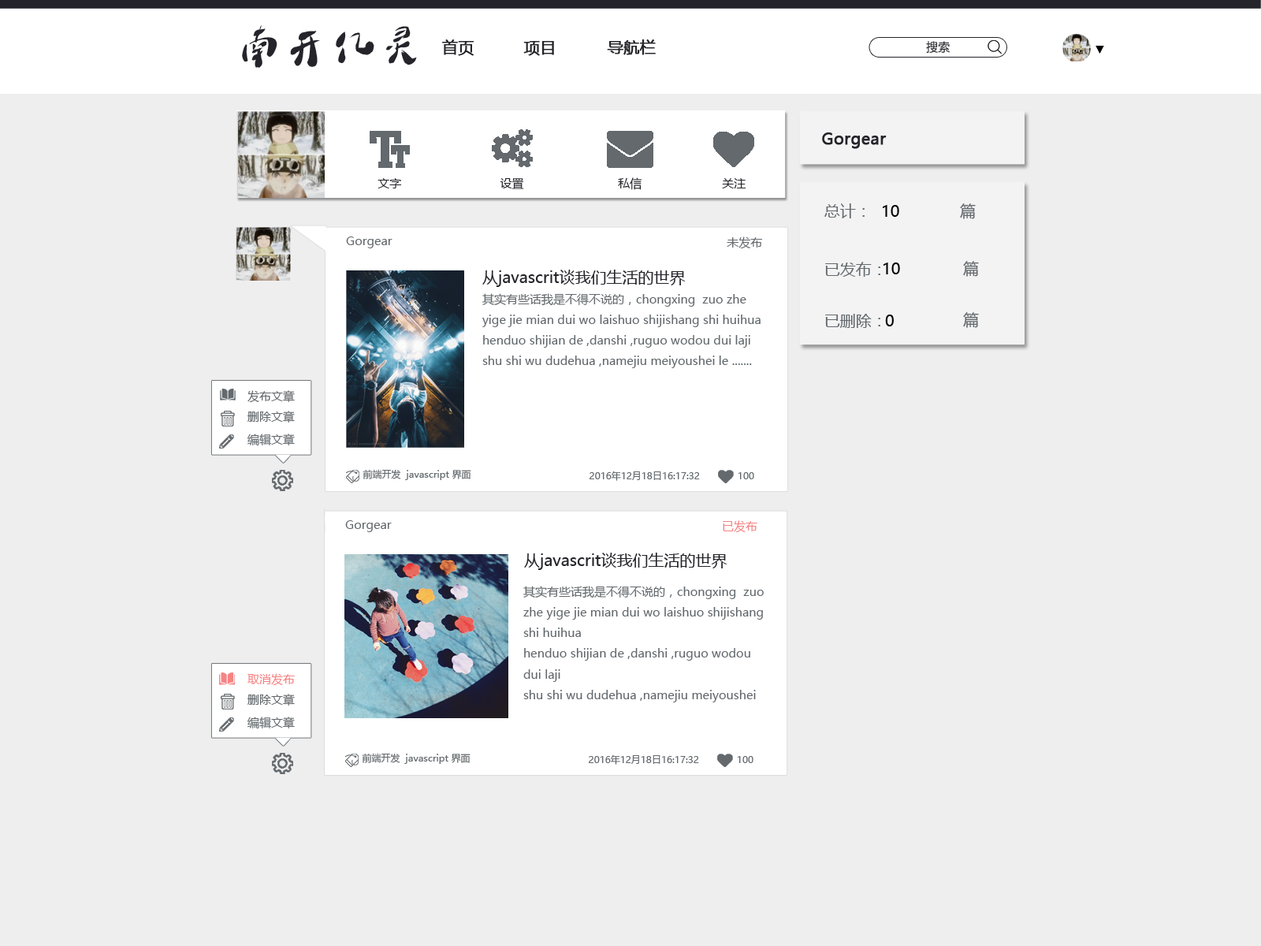
<style>
.page{position:relative;width:1261px;height:946px;background:#eeeeee}
.page>*{position:absolute;margin:0}
.t1{font:47.3px "DLTZkDLF";color:#24242a}
.t2{font:15.8px "MicrosoftYaHei";color:#24242a;font-weight:bold}
.t3{font:11.8px "MicrosoftYaHei";color:#24242a}
.t4{font:11.8px "MicrosoftYaHei";color:#000000}
.t5{font:15.8px "MicrosoftYaHei";color:#63696d}
.t6{font:15.8px "MicrosoftYaHei";color:#000000}
.t7{font:11.8px "MicrosoftYaHei";color:#63696d}
.t8{font:15.8px "MicrosoftYaHei";color:#24242a}
.t9{font:9.5px "MicrosoftYaHei";color:#63696d}
.t10{font:11.8px "MicrosoftYaHei";color:#f68383}
</style>
<div class="page">
<p class="t1" style="left:242px;top:25px;width:175px;height:43px">南开亿灵</p>
<p class="t2" style="left:442px;top:39px;width:32px;height:17px">首页</p>
<p class="t2" style="left:523px;top:41px;width:31px;height:15px">项目</p>
<p class="t2" style="left:607px;top:39px;width:49px;height:16px">导航栏</p>
<p class="t3" style="left:926px;top:41px;width:24px;height:13px">搜索</p>
<p class="t4" style="left:1095px;top:46px;width:9px;height:8px">▼</p>
<p class="t2" style="left:822px;top:132px;width:65px;height:17px">Gorgear</p>
<p class="t3" style="left:377px;top:178px;width:25px;height:10px">文字</p>
<p class="t3" style="left:500px;top:178px;width:24px;height:11px">设置</p>
<p class="t3" style="left:618px;top:177px;width:23px;height:13px">私信</p>
<p class="t3" style="left:722px;top:178px;width:24px;height:10px">关注</p>
<p class="t5" style="left:824px;top:203px;width:41px;height:15px">总计：</p>
<p class="t6" style="left:883px;top:205px;width:16px;height:12px">10</p>
<p class="t5" style="left:960px;top:203px;width:16px;height:16px">篇</p>
<p class="t7" style="left:346px;top:236px;width:46px;height:12px">Gorgear</p>
<p class="t7" style="left:727px;top:236px;width:36px;height:13px">未发布</p>
<p class="t8" style="left:482px;top:270px;width:204px;height:17px">从javascrit谈我们生活的世界</p>
<p class="t5" style="left:825px;top:262px;width:55px;height:15px">已发布：</p>
<p class="t6" style="left:883px;top:262px;width:17px;height:12px">10</p>
<p class="t5" style="left:963px;top:261px;width:16px;height:16px">篇</p>
<p class="t7" style="left:482px;top:293px;width:278px;height:75px">其实有些话我是不得不说的，chongxing  zuo zhe yige jie mian dui wo laishuo shijishang shi huihua<br>henduo shijian de ,danshi ,ruguo wodou dui laji <br>shu shi wu dudehua ,namejiu meiyoushei le .......</p>
<p class="t5" style="left:825px;top:314px;width:55px;height:14px">已删除：</p>
<p class="t6" style="left:885px;top:314px;width:9px;height:12px">0</p>
<p class="t5" style="left:963px;top:312px;width:16px;height:16px">篇</p>
<p class="t7" style="left:247px;top:390px;width:48px;height:13px">发布文章</p>
<p class="t7" style="left:247px;top:411px;width:48px;height:11px">删除文章</p>
<p class="t7" style="left:247px;top:433px;width:48px;height:13px">编辑文章</p>
<p class="t9" style="left:363px;top:469px;width:108px;height:11px">前端开发  javascript 界面</p>
<p class="t9" style="left:589px;top:470px;width:111px;height:11px">2016年12月18日16:17:32</p>
<p class="t9" style="left:738px;top:472px;width:16px;height:7px">100</p>
<p class="t7" style="left:345px;top:520px;width:47px;height:12px">Gorgear</p>
<p class="t10" style="left:723px;top:520px;width:34px;height:13px">已发布</p>
<p class="t8" style="left:524px;top:552px;width:203px;height:18px">从javascrit谈我们生活的世界</p>
<p class="t7" style="left:523px;top:586px;width:241px;height:116px">其实有些话我是不得不说的，chongxing  zuo zhe yige jie mian dui wo laishuo shijishang shi huihua<br>henduo shijian de ,danshi ,ruguo wodou dui laji <br>shu shi wu dudehua ,namejiu meiyoushei le .......</p>
<p class="t7" style="left:247px;top:694px;width:48px;height:11px">删除文章</p>
<p class="t7" style="left:247px;top:716px;width:48px;height:13px">编辑文章</p>
<p class="t9" style="left:362px;top:753px;width:108px;height:11px">前端开发  javascript 界面</p>
<p class="t9" style="left:589px;top:754px;width:110px;height:10px">2016年12月18日16:17:32</p>
<p class="t9" style="left:737px;top:756px;width:16px;height:7px">100</p>
</div>
